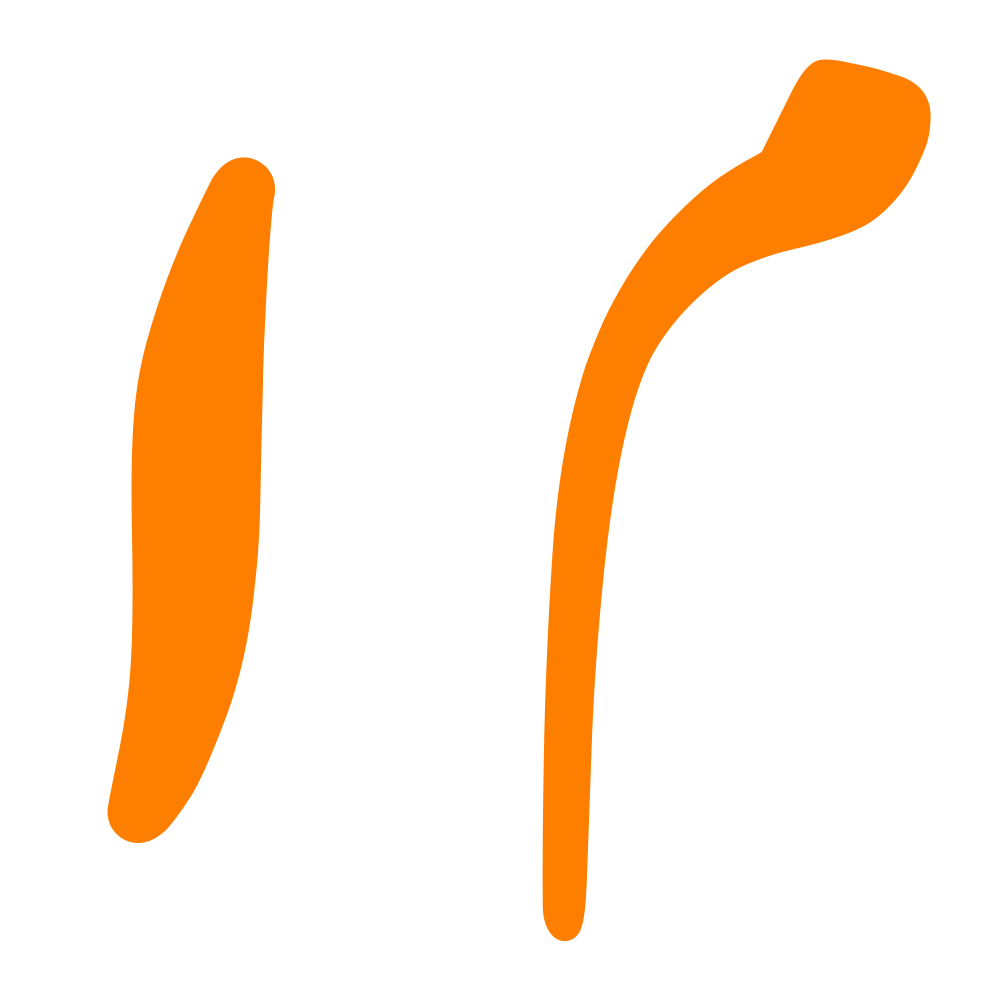
<style>
.page{position:relative;width:1000px;height:1000px;background:#ffffff}
.page>*{position:absolute;margin:0}
.t1{font:1083.3px "IranNastaliq";letter-spacing:0.02em;color:#fe7e00;font-weight:bold}
.t2{font:1750px "IranNastaliq";color:#fe7e00;font-weight:bold}
</style>
<div class="page">
<p class="t1" style="left:542px;top:59px;width:389px;height:883px">م</p>
<p class="t2" style="left:107px;top:157px;width:168px;height:686px">ا</p>
</div>
